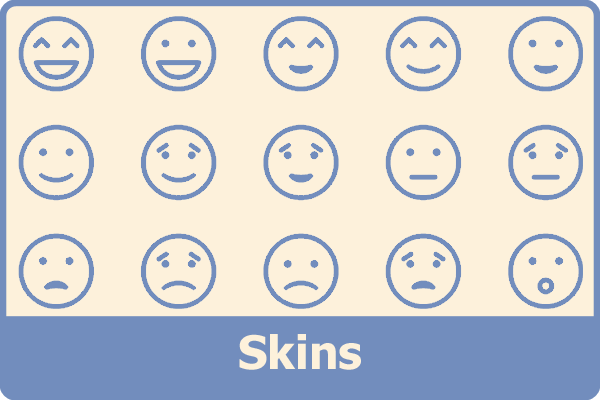
<style>
.page{position:relative;width:600px;height:400px;background:#fdf1db}
.page>*{position:absolute;margin:0}
.t1{font:46.1px "Tahoma-Bold";color:#fef2dc}
</style>
<div class="page">
<p class="t1" style="left:239px;top:334px;width:122px;height:36px">Skins</p>
</div>
